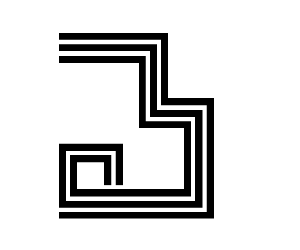
<style>
.page{position:relative;width:300px;height:250px;background:#ffffff}
.page>*{position:absolute;margin:0}
.t1{font:241.8px "TA-rb0925";letter-spacing:0.08em;color:#000000}
</style>
<div class="page">
<p class="t1" style="left:59px;top:33px;width:155px;height:186px">る</p>
</div>
